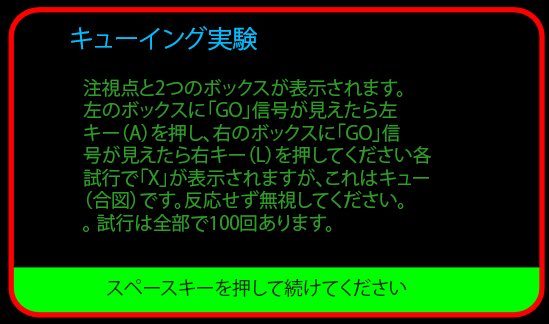
<style>
.page{position:relative;width:549px;height:324px;background:#000000}
.page>*{position:absolute;margin:0}
.t1{font:25px "KozGoPr6N-Regular";color:#00bfff}
.t2{font:18.8px "KozGoPr6N-Regular";color:#309b28}
.t3{font:18.8px "KozGoPr6N-Regular";color:#0d2d0a}
</style>
<div class="page">
<p class="t1" style="left:71px;top:26px;width:186px;height:25px">キューイング実験</p>
<p class="t2" style="left:83px;top:78px;width:348px;height:154px">注視点と2つのボックスが表示されます。<br>左のボックスに「GO」信号が見えたら左<br>キー（A）を押し、右のボックスに「GO」信<br>号が見えたら右キー（L）を押してください各<br>試行で「X」が表示されますが、これはキュー<br>（合図）です。反応せず無視してください。<br>。 試行は全部で100回あります。</p>
<p class="t3" style="left:107px;top:278px;width:300px;height:19px">スペースキーを押して続けてください</p>
</div>
